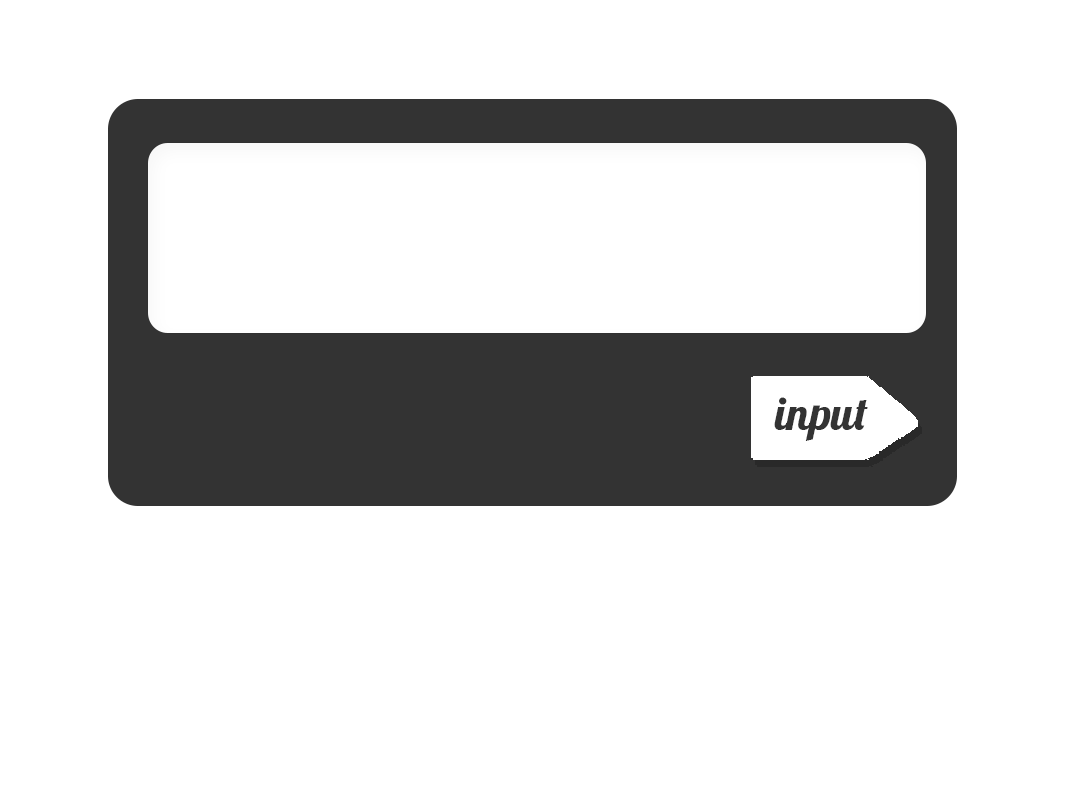
<style>
.page{position:relative;width:1080px;height:786px;background:#ffffff}
.page>*{position:absolute;margin:0}
.t1{font:45.8px "Lobster-Regular";color:#333333}
</style>
<div class="page">
<p class="t1" style="left:774px;top:397px;width:94px;height:44px">input</p>
</div>
